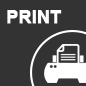
<style>
.page{position:relative;width:86px;height:86px;background:#333333}
.page>*{position:absolute;margin:0}
.t1{font:17.8px "Arial-BoldMT";color:#ffffff;text-transform:uppercase;font-weight:bold}
</style>
<div class="page">
<p class="t1" style="left:7px;top:10px;width:55px;height:14px">Print</p>
</div>
